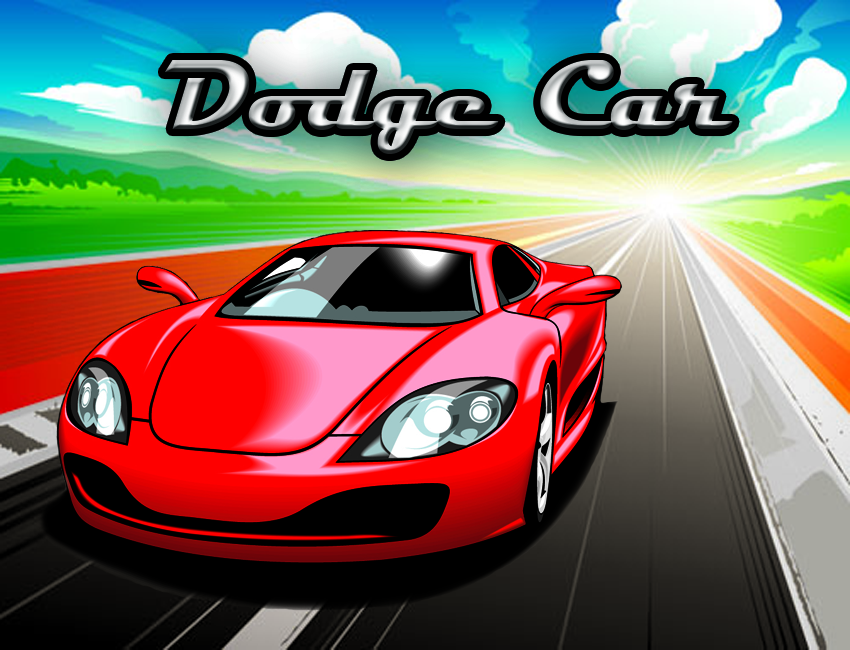
<style>
.page{position:relative;width:850px;height:650px}
.page>*{position:absolute;margin:0}
.t1{font:100.3px "Magneto-Bold"}
</style>
<div class="page">
<p class="t1" style="left:164px;top:60px;width:569px;height:94px">Dodge Car</p>
</div>
